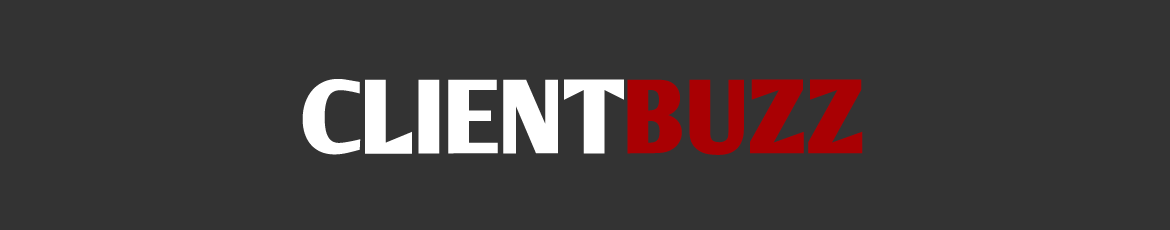
<style>
.page{position:relative;width:1170px;height:230px;background:#333333}
.page>*{position:absolute;margin:0}
.t1{font:103.1px "ArmWrestler-Bold";color:#ffffff}
.t2{font:103.1px "ArmWrestler-Bold";color:#a90003}
</style>
<div class="page">
<p class="t1" style="left:302px;top:79px;width:561px;height:76px">CLIENT<span class="t2">BUZZ</span></p>
</div>
